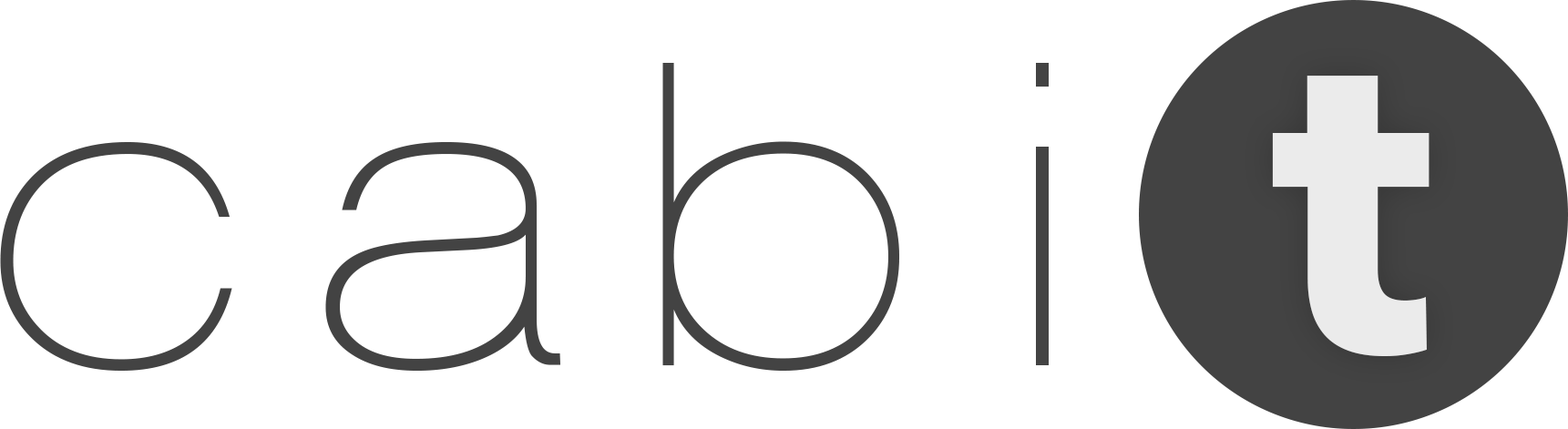
<style>
.page{position:relative;width:1568px;height:429px;background:#ffffff}
.page>*{position:absolute;margin:0}
.t1{font:455.5px "DISCO";color:#434343}
.t2{font:437.3px "AvenirNext-Bold";color:#ebebeb}
</style>
<div class="page">
<p class="t1" style="left:0px;top:63px;width:1049px;height:308px">cabi</p>
<p class="t2" style="left:1272px;top:76px;width:158px;height:280px">t</p>
</div>
